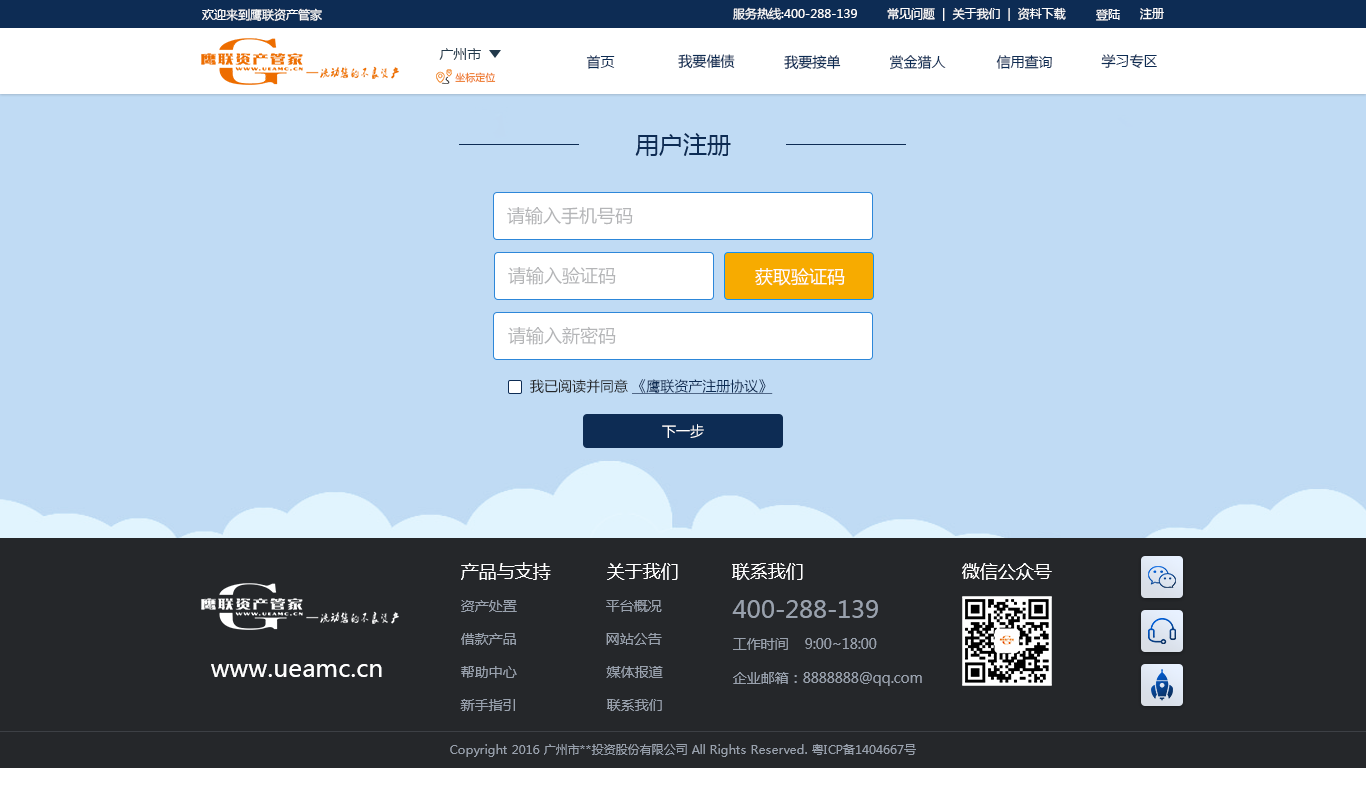
<style>
.page{position:relative;width:1366px;height:800px;background:#c0dbf4}
.page>*{position:absolute;margin:0}
.t1{font:12px "MicrosoftYaHei";color:#fefefe}
.t2{font:14px "MicrosoftYaHei";color:#21394b}
.t3{font:14px "MicrosoftYaHei";color:#0d2c54}
.t4{font:10px "MicrosoftYaHei"}
.t5{font:24px "MicrosoftYaHei";color:#0d2c54}
.t6{font:18px "MicrosoftYaHei";color:#b4b5b7}
.t7{font:18px "MicrosoftYaHei";color:#ffffff}
.t8{font:14px "MicrosoftYaHei";color:#0d2c54;text-decoration:underline}
.t9{font:14px "MicrosoftYaHei";color:#25272a}
.t10{font:14px "MicrosoftYaHei";color:#ffffff}
.t11{font:14px "MicrosoftYaHei";color:#99a1ad}
.t12{font:24px "MicrosoftYaHei";color:#99a1ad}
.t13{font:24px "MicrosoftYaHei";color:#ffffff}
.t14{font:12px "MicrosoftYaHei";color:#99a1ad}
</style>
<div class="page">
<p class="t1" style="left:202px;top:8px;width:120px;height:13px">欢迎来到鹰联资产管家</p>
<p class="t1" style="left:733px;top:7px;width:124px;height:13px">服务热线:400-288-139</p>
<p class="t1" style="left:887px;top:7px;width:179px;height:14px">常见问题  |  关于我们  |  资料下载</p>
<p class="t1" style="left:1096px;top:9px;width:24px;height:12px">登陆</p>
<p class="t1" style="left:1140px;top:8px;width:24px;height:12px">注册</p>
<p class="t2" style="left:439px;top:48px;width:42px;height:12px">广州市</p>
<p class="t3" style="left:678px;top:54px;width:57px;height:15px">我要催债</p>
<p class="t3" style="left:1101px;top:54px;width:56px;height:15px">学习专区</p>
<p class="t3" style="left:586px;top:55px;width:29px;height:14px">首页</p>
<p class="t3" style="left:784px;top:55px;width:57px;height:15px">我要接单</p>
<p class="t3" style="left:890px;top:55px;width:56px;height:15px">赏金猎人</p>
<p class="t3" style="left:996px;top:55px;width:56px;height:14px">信用查询</p>
<p class="t4" style="left:455px;top:72px;width:41px;height:11px">坐标定位</p>
<p class="t5" style="left:635px;top:133px;width:96px;height:23px">用户注册</p>
<p class="t6" style="left:507px;top:207px;width:126px;height:18px">请输入手机号码</p>
<p class="t6" style="left:508px;top:267px;width:108px;height:18px">请输入验证码</p>
<p class="t7" style="left:755px;top:268px;width:90px;height:18px">获取验证码</p>
<p class="t6" style="left:508px;top:326px;width:108px;height:19px">请输入新密码</p>
<p class="t8" style="left:530px;top:379px;width:243px;height:15px"><span class="t9">我已阅读并同意 </span>《鹰联资产注册协议》</p>
<p class="t10" style="left:662px;top:424px;width:42px;height:14px">下一步</p>
<p class="t7" style="left:461px;top:562px;width:90px;height:18px">产品与支持</p>
<p class="t7" style="left:607px;top:563px;width:71px;height:17px">关于我们</p>
<p class="t7" style="left:732px;top:563px;width:71px;height:17px">联系我们</p>
<p class="t7" style="left:962px;top:563px;width:90px;height:17px">微信公众号</p>
<p class="t11" style="left:461px;top:600px;width:56px;height:12px">资产处置</p>
<p class="t11" style="left:606px;top:600px;width:56px;height:12px">平台概况</p>
<p class="t12" style="left:732px;top:600px;width:146px;height:18px">400-288-139</p>
<p class="t11" style="left:461px;top:633px;width:55px;height:12px">借款产品</p>
<p class="t11" style="left:606px;top:633px;width:56px;height:12px">网站公告</p>
<p class="t11" style="left:733px;top:638px;width:144px;height:12px">工作时间    9:00~18:00</p>
<p class="t13" style="left:211px;top:664px;width:171px;height:13px">www.ueamc.cn</p>
<p class="t11" style="left:461px;top:666px;width:56px;height:12px">帮助中心</p>
<p class="t11" style="left:606px;top:666px;width:57px;height:12px">媒体报道</p>
<p class="t11" style="left:733px;top:672px;width:189px;height:14px">企业邮箱：8888888@qq.com</p>
<p class="t11" style="left:460px;top:699px;width:55px;height:12px">新手指引</p>
<p class="t11" style="left:607px;top:699px;width:55px;height:12px">联系我们</p>
<p class="t14" style="left:450px;top:744px;width:466px;height:13px">Copyright 2016 广州市**投资股份有限公司 All Rights Reserved. 粤ICP备1404667号</p>
</div>
